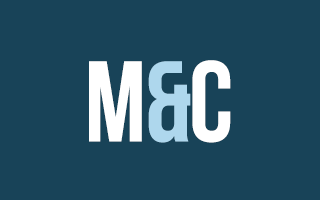
<style>
.page{position:relative;width:320px;height:200px;background:#184358}
.page>*{position:absolute;margin:0}
.t1{font:114.1px "BebasNeue";letter-spacing:-0.02em;color:#ffffff}
.t2{font:114.1px "BebasNeue";letter-spacing:-0.02em;color:#aed7ed}
</style>
<div class="page">
<p class="t1" style="left:89px;top:60px;width:142px;height:83px">M<span class="t2">&amp;</span>C</p>
</div>
